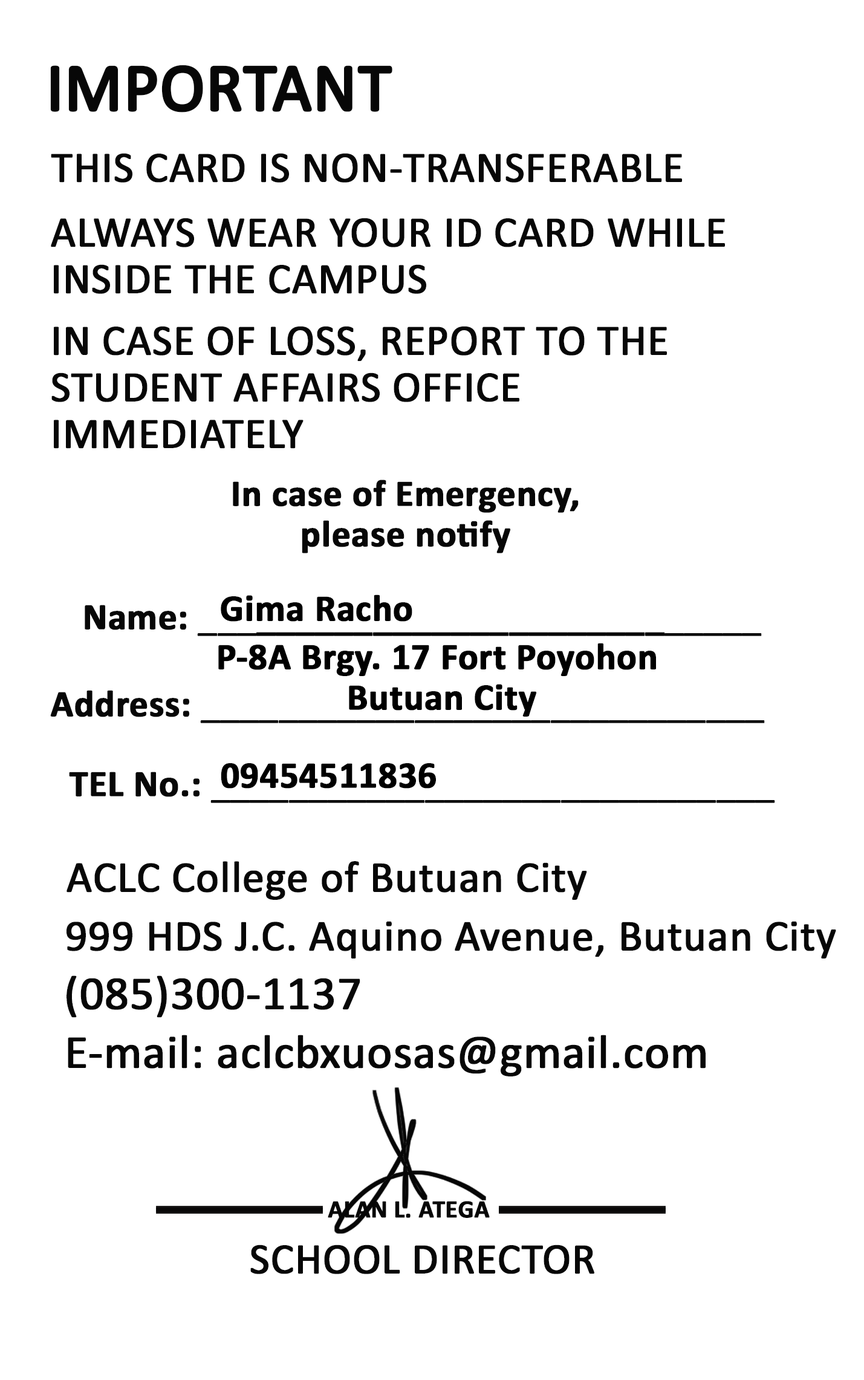
<style>
.page{position:relative;width:864px;height:1380px;background:#ffffff}
.page>*{position:absolute;margin:0}
.t1{font:67.8px "Calibri";color:#070707;font-weight:bold}
.t2{font:43.5px "Calibri";color:#070707;font-weight:bold}
.t3{font:37.7px "Calibri-Bold";color:#070707;font-weight:bold}
.t4{font:37.7px "Calibri";color:#070707;font-weight:bold}
.t5{font:37.7px "Calibri-Bold";color:#000000;font-weight:bold}
.t6{font:44.2px "Calibri";color:#070707;font-weight:bold}
.t7{font:44.4px "Calibri";color:#070707;font-weight:bold}
.t8{font:47.5px "Calibri";color:#070707;font-weight:bold}
.t9{font:25.2px "Calibri-Bold";color:#070707;font-weight:bold}
</style>
<div class="page">
<p class="t1" style="left:50px;top:65px;width:342px;height:47px">IMPORTANT</p>
<p class="t2" style="left:51px;top:153px;width:631px;height:30px">THIS CARD IS NON-TRANSFERABLE</p>
<p class="t2" style="left:51px;top:218px;width:674px;height:76px">ALWAYS WEAR YOUR ID CARD WHILE<br>INSIDE THE CAMPUS</p>
<p class="t2" style="left:51px;top:326px;width:616px;height:123px">IN CASE OF LOSS, REPORT TO THE<br>STUDENT AFFAIRS OFFICE<br>IMMEDIATELY</p>
<p class="t3" style="left:233px;top:480px;width:346px;height:73px;text-align:center">In case of Emergency,<br>please notify</p>
<p class="t3" style="left:85px;top:605px;width:677px;height:31px">Name:<span class="t4"> ___</span>_____________________<span class="t4">_____</span></p>
<p class="t5" style="left:221px;top:594px;width:191px;height:28px">Gima Racho</p>
<p class="t5" style="left:218px;top:643px;width:438px;height:74px;text-align:center">P-8A Brgy. 17 Fort Poyohon <br>Butuan City</p>
<p class="t4" style="left:50px;top:690px;width:715px;height:33px"><span class="t3">Address: </span>_____________________________</p>
<p class="t4" style="left:69px;top:772px;width:706px;height:31px"><span class="t3">TEL No.:</span> _____________________________</p>
<p class="t5" style="left:221px;top:763px;width:215px;height:26px">09454511836</p>
<p class="t6" style="left:67px;top:861px;width:520px;height:39px"><span class="t7">A</span>CLC College of Butuan City</p>
<p class="t6" style="left:67px;top:921px;width:769px;height:37px">999 HDS J.C. Aquino Avenue, Butuan City</p>
<p class="t8" style="left:67px;top:975px;width:293px;height:43px">(085)300-1137</p>
<p class="t8" style="left:68px;top:1035px;width:638px;height:41px">E-mail: aclcbxuosas@gmail.com</p>
<p class="t9" style="left:328px;top:1201px;width:162px;height:17px">ALAN L. ATEGA</p>
<p class="t2" style="left:250px;top:1244px;width:344px;height:30px">SCHOOL DIRECTOR</p>
</div>
